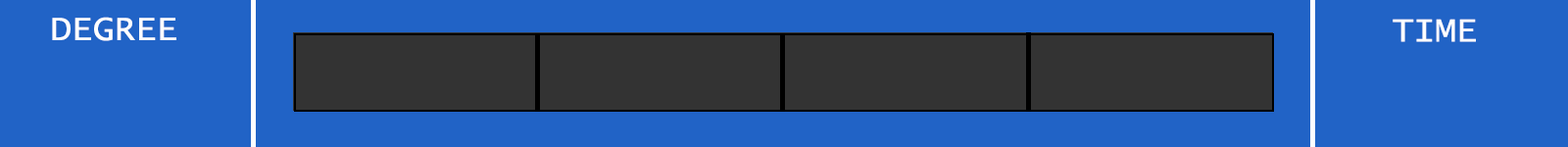
<style>
.page{position:relative;width:1568px;height:147px;background:#2163c6}
.page>*{position:absolute;margin:0}
.t1{font:35.3px "LucidaConsole";color:#ffffff}
</style>
<div class="page">
<p class="t1" style="left:52px;top:17px;width:124px;height:24px">DEGREE</p>
<p class="t1" style="left:1393px;top:19px;width:83px;height:23px">TIME</p>
</div>
